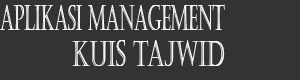
<style>
.page{position:relative;width:300px;height:80px;background:#333333}
.page>*{position:absolute;margin:0}
.t1{font:34.7px "Castellar";color:#fcfcfc;scale:0.48 1}
.t2{font:36px "Castellar";color:#f9f9f9;scale:0.58 1}
</style>
<div class="page">
<p class="t1" style="left:0px;top:4px;width:225px;height:26px">APLIKASI management</p>
<p class="t2" style="left:72px;top:40px;width:153px;height:26px">KUIS TAJWID</p>
</div>
